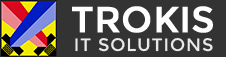
<style>
.page{position:relative;width:226px;height:57px;background:#333333}
.page>*{position:absolute;margin:0}
.t1{font:36px "Montserrat-Regular";color:#ffffff;text-transform:uppercase;font-weight:bold}
.t2{font:18px "Montserrat-Regular";letter-spacing:0.05em;color:#eaeae8;text-transform:uppercase}
</style>
<div class="page">
<p class="t1" style="left:72px;top:6px;width:141px;height:27px">Trokis</p>
<p class="t2" style="left:75px;top:37px;width:138px;height:15px">IT SOLUTIONS</p>
</div>
